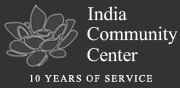
<style>
.page{position:relative;width:180px;height:88px;background:#333333}
.page>*{position:absolute;margin:0}
.t1{font:23.8px "Aparajita";color:#ffffff}
.t2{font:12.1px "Aparajita";letter-spacing:0.1em;color:#ffffff}
</style>
<div class="page">
<p class="t1" style="left:88px;top:6px;width:39px;height:15px">India</p>
<p class="t1" style="left:87px;top:26px;width:91px;height:19px">Community</p>
<p class="t1" style="left:87px;top:47px;width:51px;height:15px">Center</p>
<p class="t2" style="left:30px;top:74px;width:123px;height:8px">10 YEARS OF SERVICE</p>
</div>
